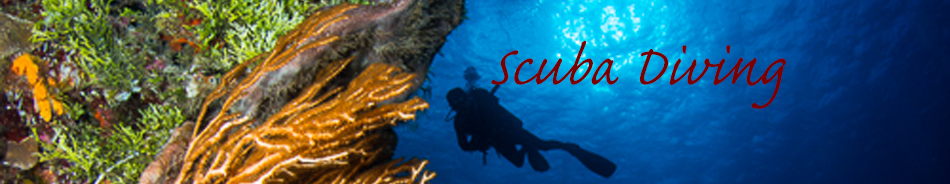
<style>
.page{position:relative;width:950px;height:184px}
.page>*{position:absolute;margin:0}
.t1{font:72px "CaflischScriptPro-Regular";color:#790000}
</style>
<div class="page">
<p class="t1" style="left:491px;top:40px;width:295px;height:69px">Scuba Diving</p>
</div>
